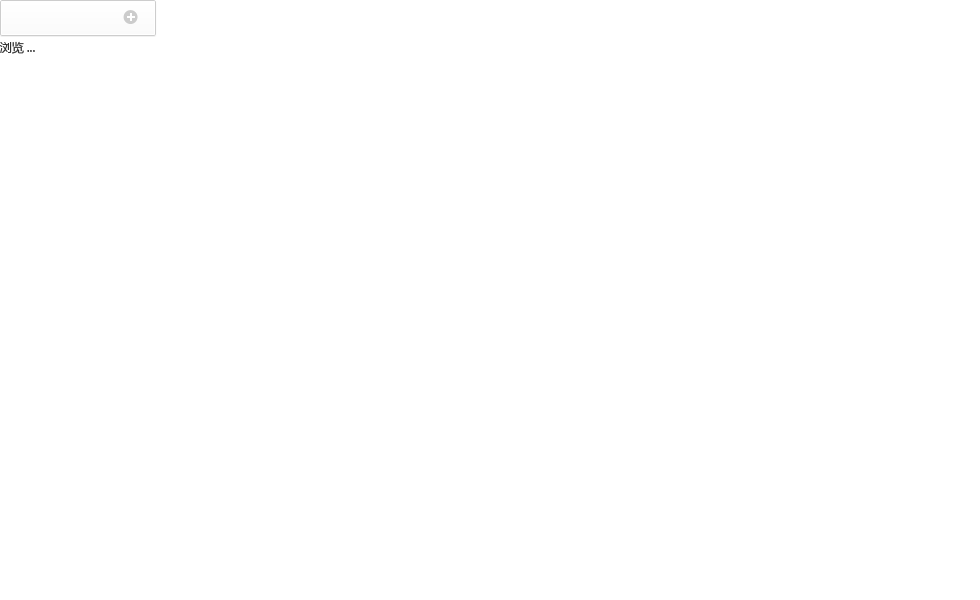
<style>
.page{position:relative;width:980px;height:600px;background:#ffffff}
.page>*{position:absolute;margin:0}
.t1{font:12px "MicrosoftYaHei";color:#333333}
</style>
<div class="page">
<p class="t1" style="left:0px;top:41px;width:35px;height:13px">浏览...</p>
</div>
